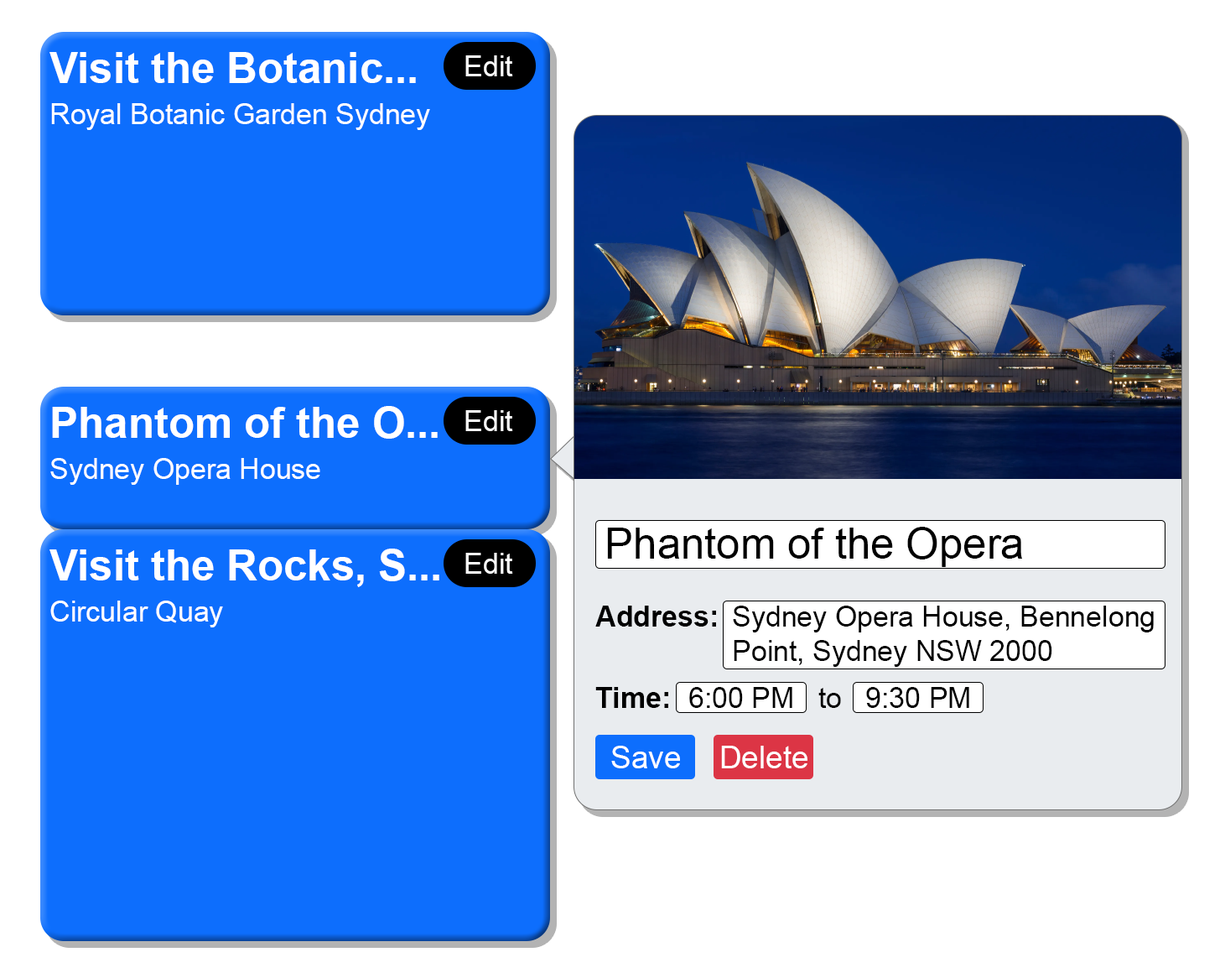
<style>
.page{position:relative;width:1225px;height:973px;background:#ffffff}
.page>*{position:absolute;margin:0}
.t1{font:42.7px "Arial-BoldMT";color:#ffffff}
.t2{font:28.4px "ArialMT";color:#ffffff}
.t3{font:42.7px "ArialMT";color:#000000}
.t4{font:28.4px/40.6px "Arial-BoldMT";color:#010101}
.t5{font:28.4px "ArialMT";color:#010101}
.t6{font:31px "ArialMT";color:#ffffff}
</style>
<div class="page">
<p class="t1" style="left:49px;top:52px;width:367px;height:31px">Visit the Botanic...</p>
<p class="t2" style="left:466px;top:55px;width:47px;height:21px">Edit</p>
<p class="t2" style="left:51px;top:103px;width:379px;height:27px">Royal Botanic Garden Sydney</p>
<p class="t1" style="left:52px;top:406px;width:386px;height:33px">Phantom of the O...</p>
<p class="t2" style="left:466px;top:410px;width:47px;height:21px">Edit</p>
<p class="t2" style="left:50px;top:458px;width:270px;height:27px">Sydney Opera House</p>
<p class="t3" style="left:607px;top:527px;width:416px;height:40px">Phantom of the Opera</p>
<p class="t1" style="left:49px;top:549px;width:391px;height:38px">Visit the Rocks, S...</p>
<p class="t2" style="left:466px;top:553px;width:47px;height:21px">Edit</p>
<p class="t2" style="left:50px;top:601px;width:173px;height:26px">Circular Quay</p>
<p class="t4" style="left:596px;top:606px;width:120px;height:102px">Address: <br><br>Time:</p>
<p class="t5" style="left:733px;top:606px;width:421px;height:61px">Sydney Opera House, Bennelong <br>Point, Sydney NSW 2000</p>
<p class="t5" style="left:690px;top:687px;width:280px;height:21px">6:00 PM   to   9:30 PM</p>
<p class="t6" style="left:611px;top:746px;width:69px;height:22px">Save</p>
<p class="t6" style="left:721px;top:746px;width:87px;height:22px">Delete</p>
</div>
